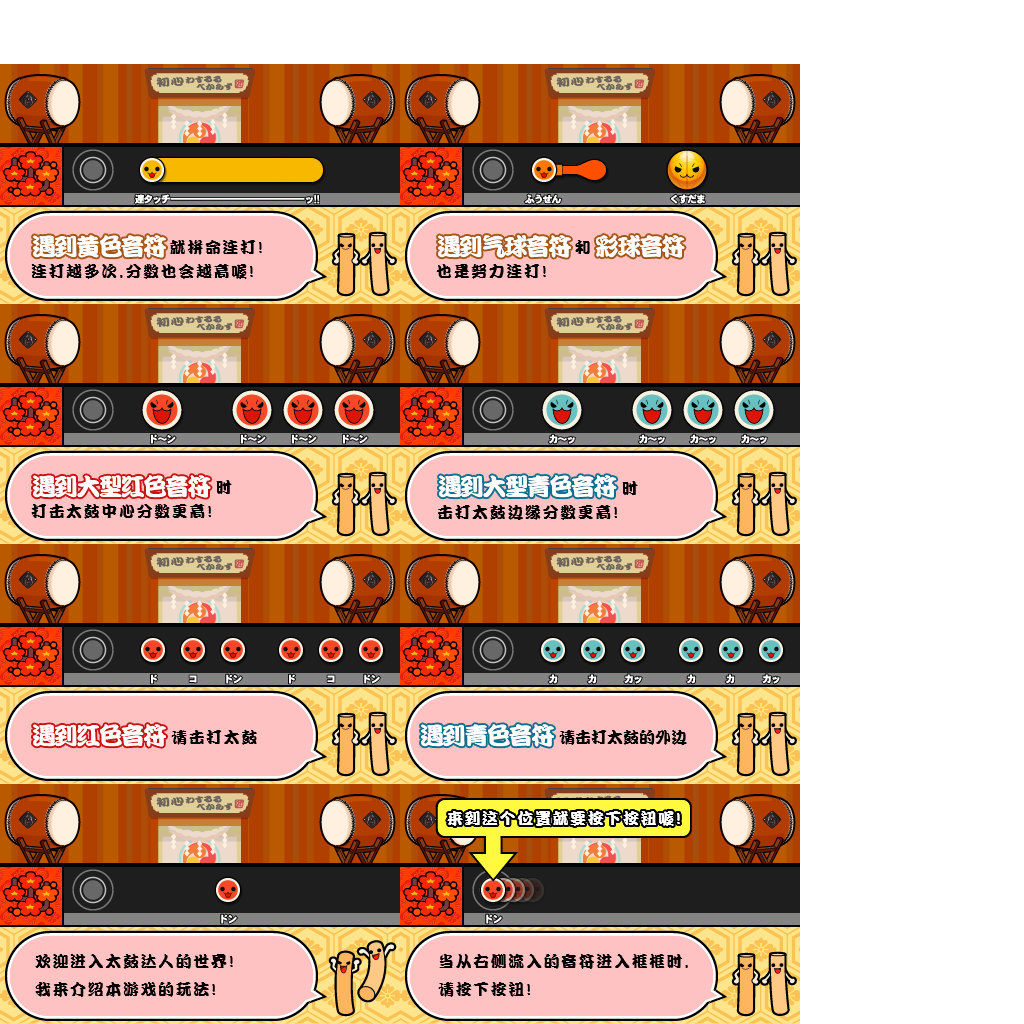
<style>
.page{position:relative;width:1024px;height:1024px;background:#ffffff}
.page>*{position:absolute;margin:0}
.t1{font:16px/24px "DFPKanTingLiuW9";letter-spacing:0.1em;color:#000000}
.t2{font:24px "DFPKanTingLiuW9";letter-spacing:-0.075em;color:#fffefe}
.t3{font:16px "DFPKanTingLiuW9";letter-spacing:0.1em;color:#000000}
.t4{font:16px "DFPKanTingLiuW9";color:#000000}
.t5{font:16px "DFPKanTingLiuW9";letter-spacing:0.1em;color:#ffffff}
</style>
<div class="page">
<p class="t1" style="left:31px;top:240px;width:231px;height:39px">就拼命连打!<br>连打越多次,分数也会越高喔!</p>
<p class="t2" style="left:33px;top:235px;width:133px;height:23px">遇到黄色音符</p>
<p class="t1" style="left:436px;top:240px;width:154px;height:39px">和<br>也是努力连打!</p>
<p class="t2" style="left:438px;top:235px;width:247px;height:23px">遇到气球音符    彩球音符</p>
<p class="t1" style="left:31px;top:480px;width:201px;height:39px">时<br>打击太鼓中心分数更高!</p>
<p class="t2" style="left:33px;top:475px;width:178px;height:23px">遇到大型红色音符</p>
<p class="t1" style="left:438px;top:481px;width:200px;height:39px">时<br>击打太鼓边缘分数更高!</p>
<p class="t2" style="left:439px;top:475px;width:178px;height:23px">遇到大型青色音符</p>
<p class="t2" style="left:33px;top:724px;width:133px;height:23px">遇到红色音符</p>
<p class="t2" style="left:421px;top:724px;width:133px;height:23px">遇到青色音符</p>
<p class="t3" style="left:171px;top:730px;width:86px;height:15px">请击打太鼓</p>
<p class="t4" style="left:559px;top:730px;width:128px;height:15px">请击打太鼓的外边</p>
<p class="t5" style="left:447px;top:811px;width:233px;height:15px">来到这个位置就要按下按钮喔!</p>
<p class="t3" style="left:35px;top:954px;width:198px;height:43px">欢迎进入太鼓达人的世界!<br>我来介绍本游戏的玩法!</p>
<p class="t3" style="left:438px;top:954px;width:250px;height:43px">当从右侧流入的音符进入框框时,<br>请按下按钮!</p>
</div>
